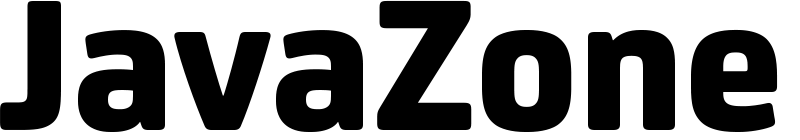
<style>
.page{position:relative;width:800px;height:140px;background:#ffffff}
.page>*{position:absolute;margin:0}
.t1{font:200px "FSJoey-Heavy";color:#000000}
</style>
<div class="page">
<p class="t1" style="left:0px;top:0px;width:778px;height:132px">JavaZone</p>
</div>
